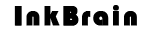
<style>
.page{position:relative;width:150px;height:30px;background:#ffffff}
.page>*{position:absolute;margin:0}
.t1{font:27.8px "Bauhaus93";letter-spacing:0.08em;color:#000000;font-weight:bold}
</style>
<div class="page">
<p class="t1" style="left:14px;top:6px;width:46px;height:20px">Ink</p>
<p class="t1" style="left:15px;top:6px;width:7px;height:20px">I</p>
<p class="t1" style="left:63px;top:5px;width:74px;height:21px">Brain</p>
<p class="t1" style="left:63px;top:6px;width:16px;height:20px">B</p>
</div>
